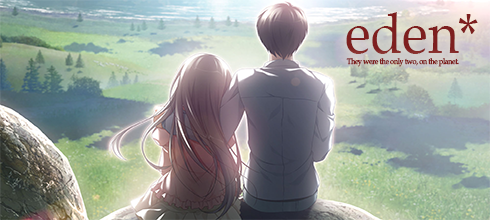
<style>
.page{position:relative;width:490px;height:220px}
.page>*{position:absolute;margin:0}
.t1{font:56.5px "BookAntiqua";color:#7e1f1f;scale:0.93 1}
.t2{font:7.9px "BookAntiqua";letter-spacing:-0.05em;color:#7e1f1f;scale:0.93 1}
</style>
<div class="page">
<p class="t1" style="left:346px;top:12px;width:132px;height:42px">eden*</p>
<p class="t2" style="left:346px;top:58px;width:113px;height:9px">They were the only two, on the planet.</p>
</div>
